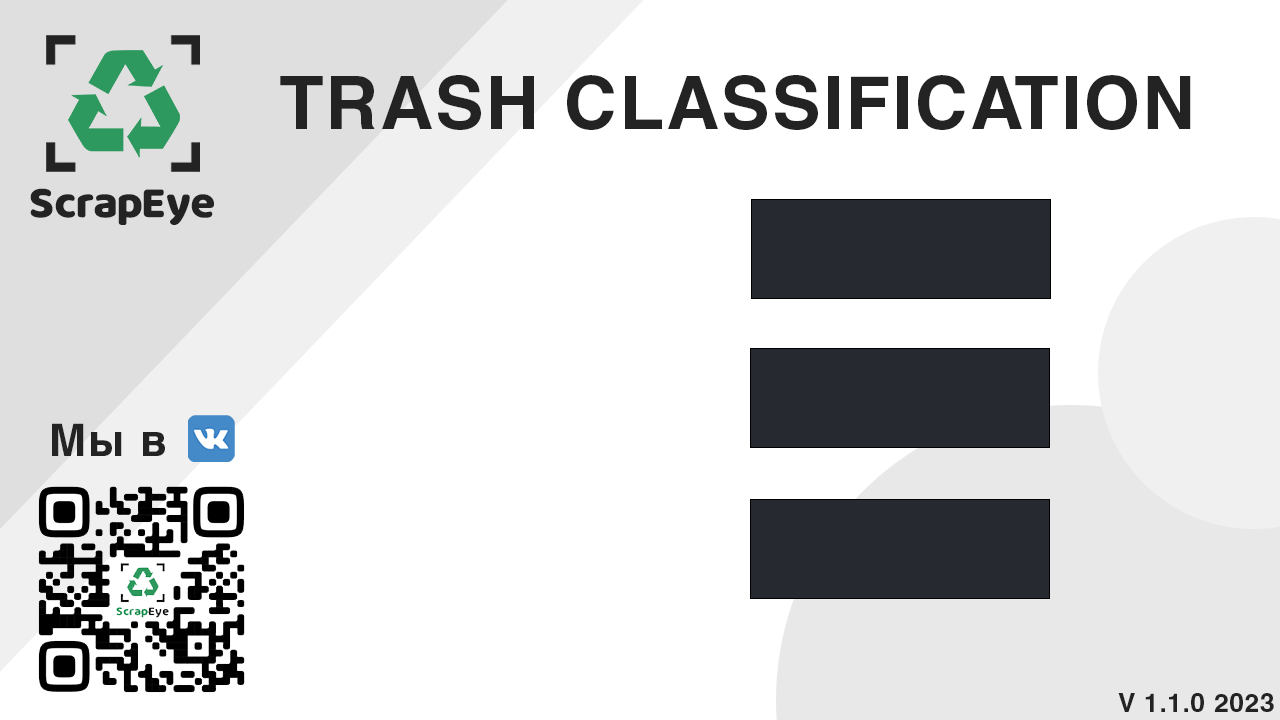
<style>
.page{position:relative;width:1280px;height:720px;background:#ffffff}
.page>*{position:absolute;margin:0}
.t1{font:73.2px "Helvetica-Bold";letter-spacing:0.03em;color:#232323}
.t2{font:45.5px "Quentin_Pro-Regular";letter-spacing:0.03em;color:#232323}
.t3{font:45.2px "Helvetica-Bold";letter-spacing:0.03em;color:#232323}
.t4{font:26px "Helvetica-Bold";letter-spacing:0.03em;color:#232323}
</style>
<div class="page">
<p class="t1" style="left:280px;top:75px;width:911px;height:55px">TRASH CLASSIFICATION</p>
<p class="t2" style="left:30px;top:188px;width:184px;height:37px">ScrapEye</p>
<p class="t3" style="left:52px;top:423px;width:113px;height:33px">Мы в</p>
<p class="t4" style="left:1118px;top:693px;width:156px;height:19px">V 1.1.0 2023</p>
</div>
